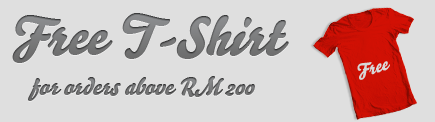
<style>
.page{position:relative;width:435px;height:122px;background:#dfdfdf}
.page>*{position:absolute;margin:0}
.t1{font:54px "Bello-Script";color:#747576;font-style:italic}
.t2{font:24px "Bello-Script";color:#6c6d6e;font-style:italic}
</style>
<div class="page">
<p class="t1" style="left:12px;top:13px;width:277px;height:50px">Free T-Shirt</p>
<p class="t2" style="left:28px;top:76px;width:227px;height:25px">for orders above RM 200</p>
</div>
